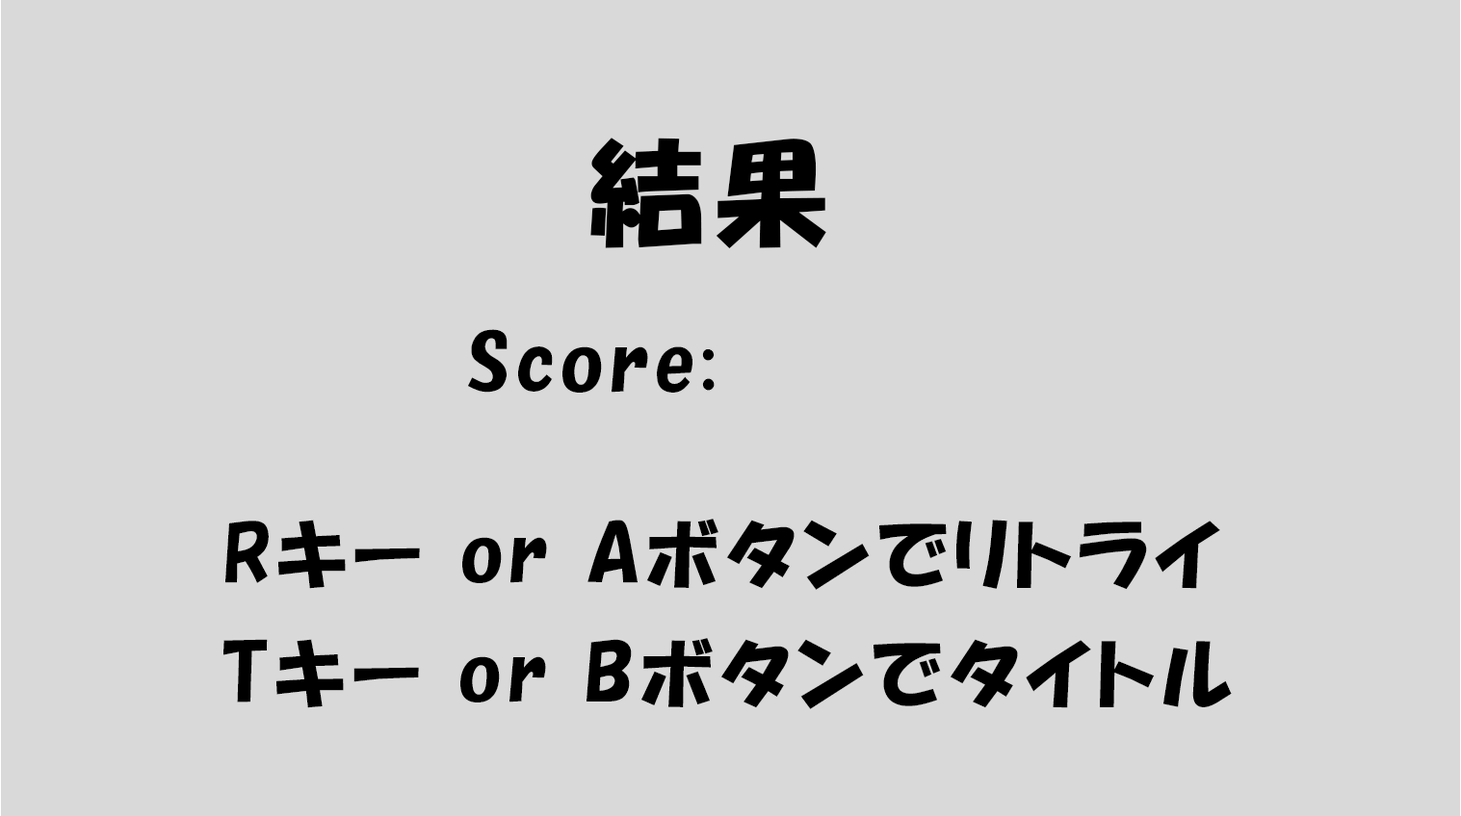
<style>
.page{position:relative;width:1461px;height:816px;background:#d9d9d9}
.page>*{position:absolute;margin:0}
.t1{font:115.5px "HGPSoeiKakupoptai";letter-spacing:0.08em;color:#000000}
.t2{font:77px "HGPSoeiKakupoptai";letter-spacing:0.08em;color:#000000}
</style>
<div class="page">
<p class="t1" style="left:590px;top:138px;width:236px;height:111px">結果</p>
<p class="t2" style="left:468px;top:329px;width:246px;height:64px">Score:</p>
<p class="t2" style="left:225px;top:519px;width:995px;height:71px">Rキー or Aボタンでリトライ</p>
<p class="t2" style="left:223px;top:638px;width:1008px;height:72px">Tキー or Bボタンでタイトル</p>
</div>
